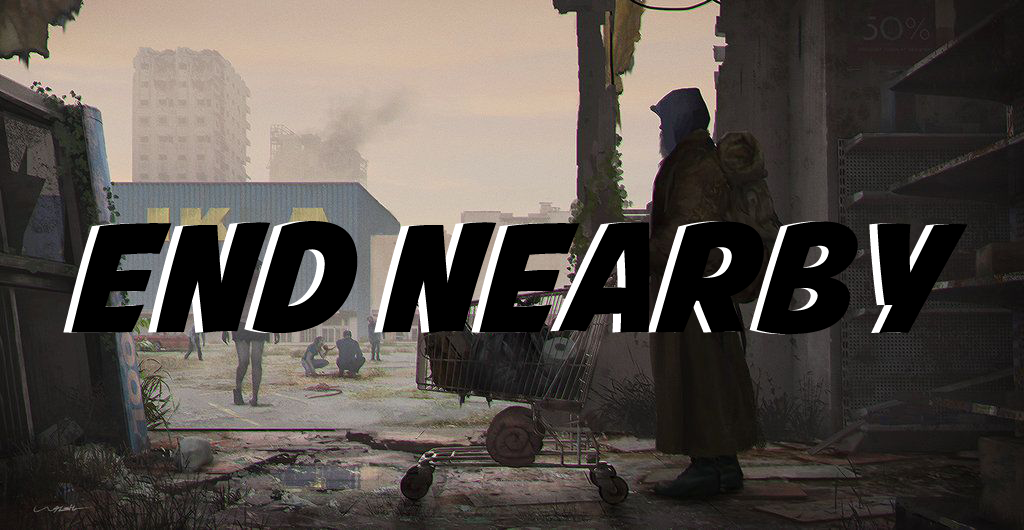
<style>
.page{position:relative;width:1024px;height:530px}
.page>*{position:absolute;margin:0}
.t1{font:150px "AvengeanceMightiestAvenger";color:#000000}
</style>
<div class="page">
<p class="t1" style="left:71px;top:221px;width:897px;height:114px">end nearby</p>
</div>
